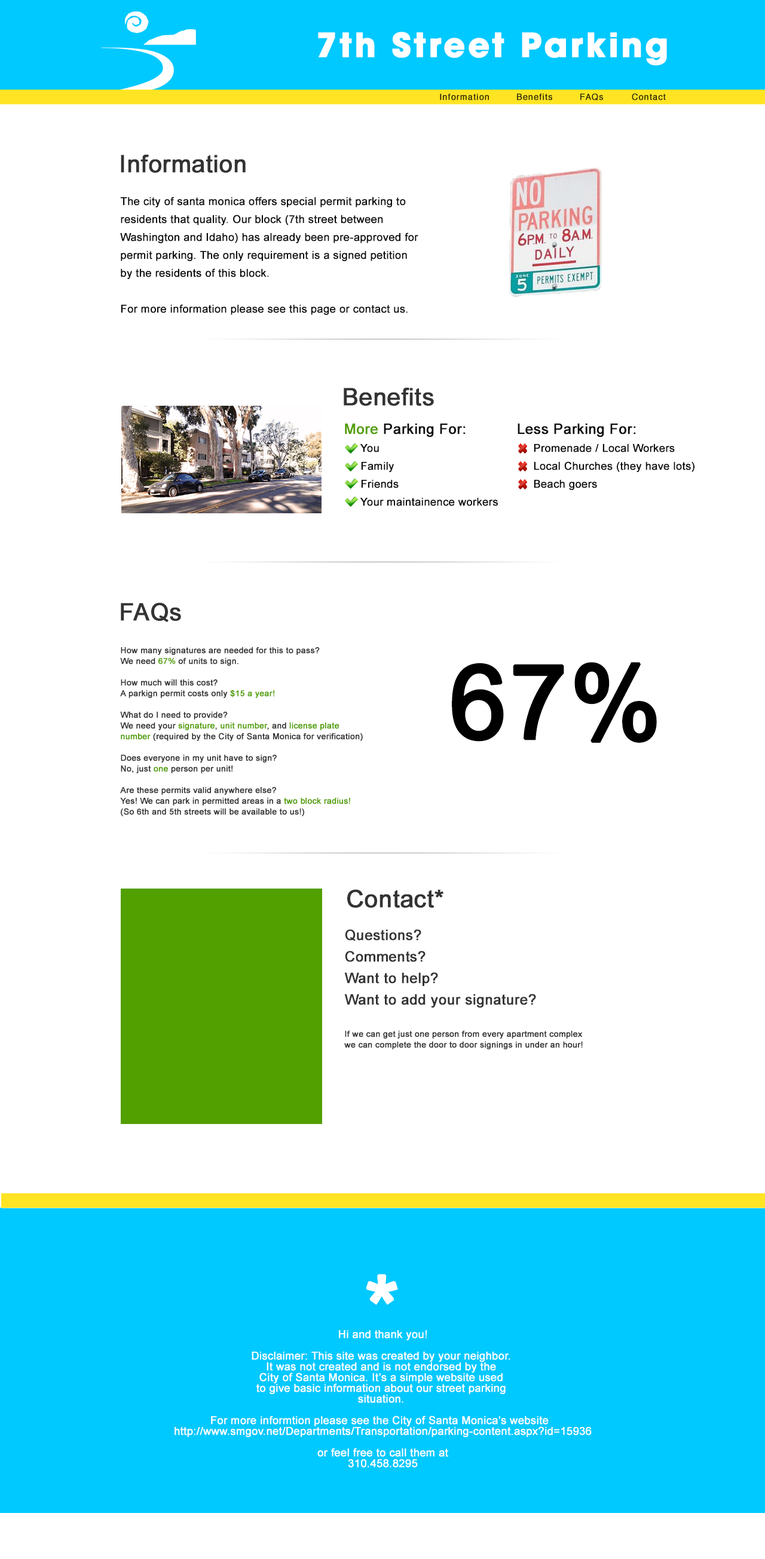
<style>
.page{position:relative;width:765px;height:1559px;background:#ffffff}
.page>*{position:absolute;margin:0}
.t1{font:32.9px "HUGE-AvantGarde-Bold";letter-spacing:0.07em;color:#ffffff;font-weight:bold}
.t2{font:8.4px "Helvetica";letter-spacing:0.07em;color:#2e2903;font-weight:bold}
.t3{font:23.9px "ArialMT";letter-spacing:0.005em;color:#333333;font-weight:bold}
.t4{font:10.8px/17.9px "ArialMT";letter-spacing:0.005em;color:#0d0d0d;font-weight:bold}
.t5{font:14.3px/17.9px "ArialMT";letter-spacing:0.005em;color:#529f00;font-weight:bold}
.t6{font:14.3px/17.9px "ArialMT";letter-spacing:0.005em;color:#0d0d0d;font-weight:bold}
.t7{font:8.4px/10.8px "ArialMT";letter-spacing:0.005em;color:#333333;font-weight:bold}
.t8{font:8.4px/10.8px "ArialMT";letter-spacing:0.005em;color:#529f00;font-weight:bold}
.t9{font:102.8px "ArialMT";letter-spacing:0.005em;color:#000000;font-weight:bold}
.t10{font:14.3px/21.5px "ArialMT";letter-spacing:0.005em;color:#333333;font-weight:bold}
.t11{font:89.6px "ArialMT";letter-spacing:0.005em;color:#ffffff;font-weight:bold}
.t12{font:10.8px/10.8px "ArialMT";letter-spacing:0.005em;color:#ffffff;font-weight:bold}
</style>
<div class="page">
<p class="t1" style="left:318px;top:32px;width:349px;height:34px">7th Street Parking</p>
<p class="t2" style="left:440px;top:93px;width:49px;height:7px">Information</p>
<p class="t2" style="left:517px;top:93px;width:35px;height:7px">Benefits</p>
<p class="t2" style="left:580px;top:93px;width:23px;height:7px">FAQs</p>
<p class="t2" style="left:632px;top:93px;width:34px;height:7px">Contact</p>
<p class="t3" style="left:121px;top:154px;width:125px;height:19px">Information</p>
<p class="t4" style="left:120px;top:197px;width:298px;height:118px">The city of santa monica offers special permit parking to <br>residents that quality. Our block (7th street between <br>Washington and Idaho) has already been pre-approved for<br>permit parking. The only requirement is a signed petition<br>by the residents of this block.<br><br>For more information please see this page or contact us.</p>
<p class="t3" style="left:344px;top:387px;width:90px;height:19px">Benefits</p>
<p class="t4" style="left:345px;top:423px;width:153px;height:83px"><span class="t5">More</span><span class="t6"> Parking For:<br></span>     You<br>     Family<br>     Friends<br>     Your maintainence workers</p>
<p class="t4" style="left:517px;top:423px;width:177px;height:67px"><span class="t6">Less Parking For:<br></span>     Promenade / Local Workers<br>     Local Churches (they have lots)<br>     Beach goers</p>
<p class="t3" style="left:121px;top:602px;width:60px;height:20px">FAQs</p>
<p class="t7" style="left:120px;top:647px;width:243px;height:169px">How many signatures are needed for this to pass?<br>We need <span class="t8">67%</span> of units to sign.<br><br>How much will this cost?<br>A parkign permit costs only <span class="t8">$15 a year!<br><br></span>What do I need to provide?<br>We need your <span class="t8">signature</span>, <span class="t8">unit number</span>, and <span class="t8">license plate <br>number</span> (required by the City of Santa Monica for verification)<br><br>Does everyone in my unit have to sign?<br>No, just <span class="t8">one </span>person per unit!<br><br>Are these permits valid anywhere else?<br>Yes! We can park in permitted areas in a <span class="t8">two block radius!</span> <br>(So 6th and 5th streets will be available to us!)</p>
<p class="t9" style="left:452px;top:662px;width:205px;height:81px">67%</p>
<p class="t3" style="left:347px;top:889px;width:96px;height:19px">Contact*</p>
<p class="t7" style="left:344px;top:929px;width:239px;height:120px"><span class="t10">Questions?<br>Comments?<br>Want to help?<br>Want to add your signature?<br></span><br><br>If we can get just one person from every apartment complex <br>we can complete the door to door signings in under an hour!</p>
<p class="t11" style="left:366px;top:1274px;width:32px;height:31px">*</p>
<p class="t12" style="left:174px;top:1330px;width:418px;height:138px;text-align:center">Hi and thank you!<br><br>Disclaimer: This site was created by your neighbor. <br>It was not created and is not endorsed by the <br>City of Santa Monica. It’s a simple website used <br>to give basic information about our street parking <br>situation. <br><br>For more informtion please see the City of Santa Monica’s website  <br>http://www.smgov.net/Departments/Transportation/parking-content.aspx?id=15936<br><br>or feel free to call them at<br>310.458.8295</p>
</div>
